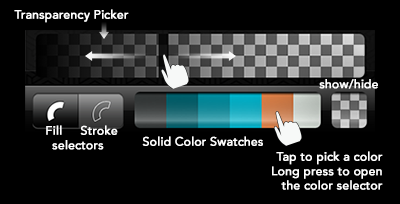
<style>
.page{position:relative;width:400px;height:204px;background:#000000}
.page>*{position:absolute;margin:0}
.t1{font:12px "Avenir-Medium";color:#ffffff;font-weight:bold}
</style>
<div class="page">
<p class="t1" style="left:14px;top:9px;width:115px;height:14px">Transparency Picker</p>
<p class="t1" style="left:319px;top:79px;width:59px;height:10px">show/hide</p>
<p class="t1" style="left:46px;top:125px;width:72px;height:25px;text-align:center">Fill     Stroke<br>selectors</p>
<p class="t1" style="left:142px;top:136px;width:121px;height:10px">Solid Color Swatches</p>
<p class="t1" style="left:272px;top:151px;width:111px;height:39px;text-align:right">Tap to pick a color<br>Long press to open<br>the color selector</p>
</div>
